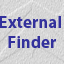
<style>
.page{position:relative;width:64px;height:64px}
.page>*{position:absolute;margin:0}
.t1{font:17px "MyriadPro-Bold";color:#33319c}
</style>
<div class="page">
<p class="t1" style="left:0px;top:16px;width:61px;height:32px;text-align:center">External <br>Finder</p>
</div>
